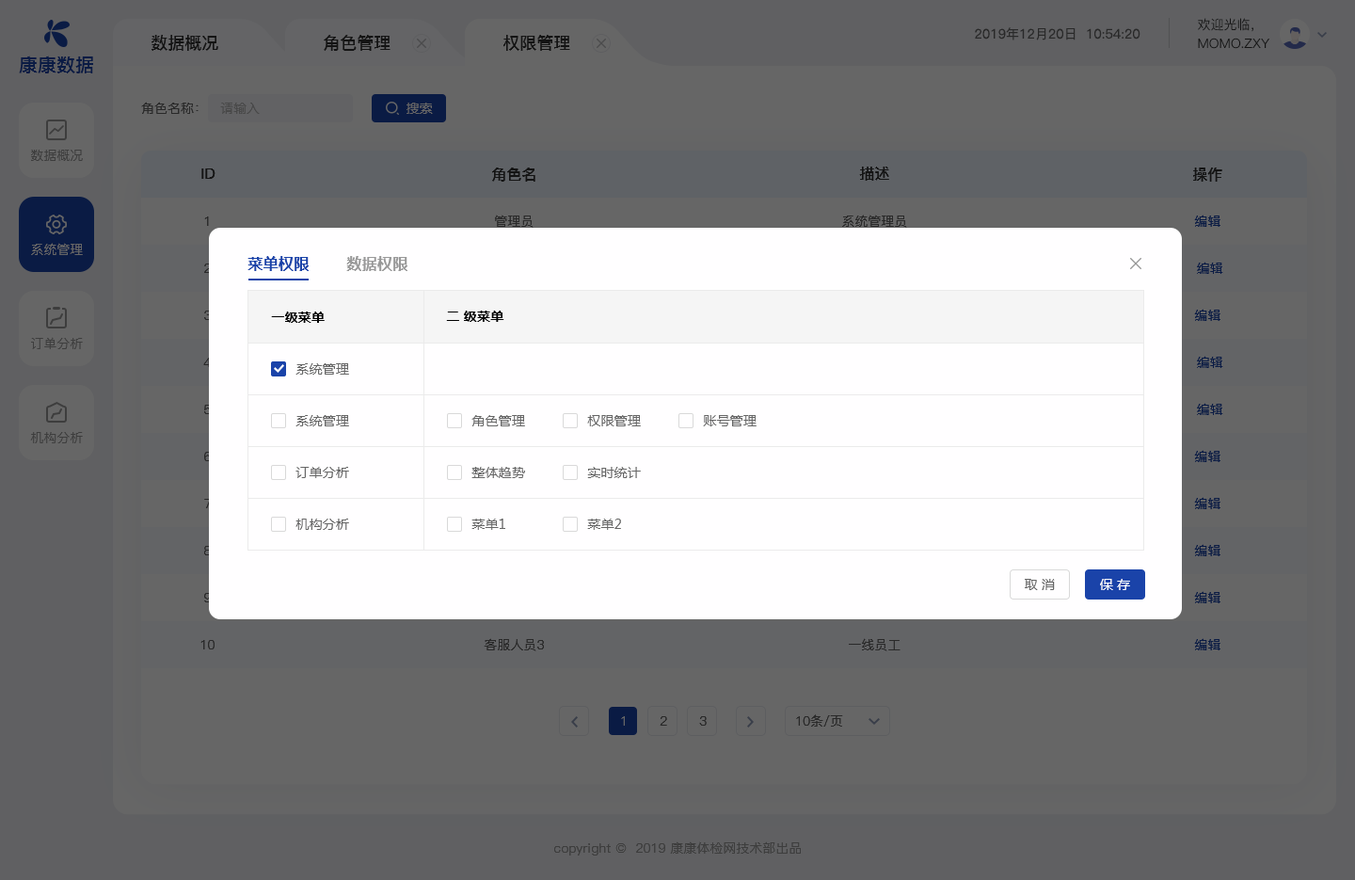
<style>
.page{position:relative;width:1355px;height:880px;background:#fffeff}
.page>*{position:absolute;margin:0}
.t1{font:13.2px "PingFang-SC-Medium";color:#141414;text-transform:uppercase}
.t2{font:13.2px "PingFang-SC-Regular";color:#292929}
.t3{font:16.9px "PingFang-SC-Bold";color:#141414;text-transform:uppercase}
.t4{font:18.8px "PingFangSC-Medium";color:#0a1b44;text-transform:uppercase}
.t5{font:13.2px "PingFang-SC-Medium";color:#292929}
.t6{font:13.2px "PingFang-SC-Medium";color:#484848}
.t7{font:13.2px "MicrosoftYaHei";letter-spacing:0.02em;color:#666666}
.t8{font:13.2px "PingFang-SC-Medium";color:#3d3d3d;text-transform:uppercase}
.t9{font:15.1px "PingFang-SC-Bold";color:#141414;text-transform:uppercase}
.t10{font:13.2px "PingFang-SC-Medium";color:#292929;text-transform:uppercase}
.t11{font:13.2px "PingFang-SC-Medium";color:#0a1b44;text-transform:uppercase}
.t12{font:13.2px "PingFang-SC-Medium";color:#666666;text-transform:uppercase}
.t13{font:15.1px "MicrosoftYaHei-Bold";letter-spacing:0.02em;color:#1a43a9}
.t14{font:15.1px "MicrosoftYaHei-Bold";letter-spacing:0.02em;color:#999999}
.t15{font:13.2px "MicrosoftYaHei-Bold";letter-spacing:0.02em;color:#000000}
.t16{font:13.2px "MicrosoftYaHei";letter-spacing:0.02em;color:#ffffff}
.t17{font:13.2px "PingFang-SC-Medium";color:#3d3d3d}
</style>
<div class="page">
<p class="t1" style="left:1198px;top:18px;width:56px;height:14px">欢迎光临，</p>
<p class="t2" style="left:975px;top:27px;width:166px;height:13px">2019年12月20日  10:54:20</p>
<p class="t3" style="left:152px;top:35px;width:66px;height:16px">数据概况</p>
<p class="t3" style="left:324px;top:35px;width:67px;height:16px">角色管理</p>
<p class="t3" style="left:503px;top:35px;width:67px;height:16px">权限管理</p>
<p class="t1" style="left:1198px;top:38px;width:72px;height:11px">momo.zxy</p>
<p class="t4" style="left:19px;top:56px;width:74px;height:17px">康康数据</p>
<p class="t5" style="left:141px;top:102px;width:58px;height:12px">角色名称：</p>
<p class="t6" style="left:220px;top:103px;width:40px;height:11px">请输入</p>
<p class="t7" style="left:407px;top:103px;width:26px;height:11px">搜索</p>
<p class="t8" style="left:31px;top:150px;width:52px;height:11px">数据概况</p>
<p class="t9" style="left:201px;top:168px;width:15px;height:11px">ID</p>
<p class="t9" style="left:492px;top:168px;width:43px;height:14px">角色名</p>
<p class="t9" style="left:859px;top:167px;width:30px;height:14px">描述</p>
<p class="t9" style="left:1193px;top:168px;width:29px;height:14px">操作</p>
<p class="t10" style="left:204px;top:216px;width:5px;height:10px">1</p>
<p class="t10" style="left:495px;top:215px;width:39px;height:13px">管理员</p>
<p class="t10" style="left:842px;top:215px;width:65px;height:13px">系统管理员</p>
<p class="t11" style="left:1194px;top:215px;width:27px;height:12px">编辑</p>
<p class="t12" style="left:31px;top:243px;width:52px;height:12px">系统管理</p>
<p class="t13" style="left:248px;top:256px;width:61px;height:15px">菜单权限</p>
<p class="t14" style="left:346px;top:256px;width:61px;height:15px">数据权限</p>
<p class="t11" style="left:1197px;top:262px;width:26px;height:12px">编辑</p>
<p class="t15" style="left:271px;top:311px;width:54px;height:12px">一级菜单</p>
<p class="t15" style="left:446px;top:311px;width:58px;height:11px">二 级菜单</p>
<p class="t11" style="left:1194px;top:309px;width:27px;height:12px">编辑</p>
<p class="t8" style="left:31px;top:337px;width:52px;height:12px">订单分析</p>
<p class="t7" style="left:296px;top:363px;width:53px;height:12px">系统管理</p>
<p class="t11" style="left:1197px;top:356px;width:26px;height:12px">编辑</p>
<p class="t11" style="left:1197px;top:403px;width:26px;height:12px">编辑</p>
<p class="t7" style="left:296px;top:415px;width:53px;height:11px">系统管理</p>
<p class="t7" style="left:471px;top:415px;width:54px;height:11px">角色管理</p>
<p class="t7" style="left:587px;top:415px;width:54px;height:11px">权限管理</p>
<p class="t7" style="left:703px;top:415px;width:54px;height:11px">账号管理</p>
<p class="t8" style="left:30px;top:432px;width:53px;height:11px">机构分析</p>
<p class="t11" style="left:1194px;top:450px;width:27px;height:12px">编辑</p>
<p class="t7" style="left:296px;top:467px;width:53px;height:11px">订单分析</p>
<p class="t7" style="left:471px;top:467px;width:54px;height:11px">整体趋势</p>
<p class="t7" style="left:587px;top:467px;width:54px;height:11px">实时统计</p>
<p class="t11" style="left:1194px;top:497px;width:27px;height:12px">编辑</p>
<p class="t7" style="left:296px;top:519px;width:53px;height:11px">机构分析</p>
<p class="t7" style="left:471px;top:519px;width:34px;height:11px">菜单1</p>
<p class="t7" style="left:587px;top:519px;width:34px;height:11px">菜单2</p>
<p class="t11" style="left:1194px;top:544px;width:27px;height:12px">编辑</p>
<p class="t7" style="left:1025px;top:579px;width:30px;height:11px">取 消</p>
<p class="t16" style="left:1100px;top:579px;width:30px;height:11px">保 存</p>
<p class="t11" style="left:1194px;top:591px;width:27px;height:12px">编辑</p>
<p class="t10" style="left:200px;top:640px;width:15px;height:9px">10</p>
<p class="t10" style="left:484px;top:638px;width:60px;height:13px">客服人员3</p>
<p class="t10" style="left:849px;top:638px;width:52px;height:13px">一线员工</p>
<p class="t11" style="left:1194px;top:638px;width:27px;height:12px">编辑</p>
<p class="t12" style="left:621px;top:716px;width:4px;height:10px">1</p>
<p class="t10" style="left:660px;top:716px;width:7px;height:10px">2</p>
<p class="t10" style="left:699px;top:716px;width:8px;height:10px">3</p>
<p class="t10" style="left:796px;top:714px;width:47px;height:13px">10条/页</p>
<p class="t17" style="left:554px;top:841px;width:247px;height:14px">copyright ©  2019 康康体检网技术部出品</p>
</div>
